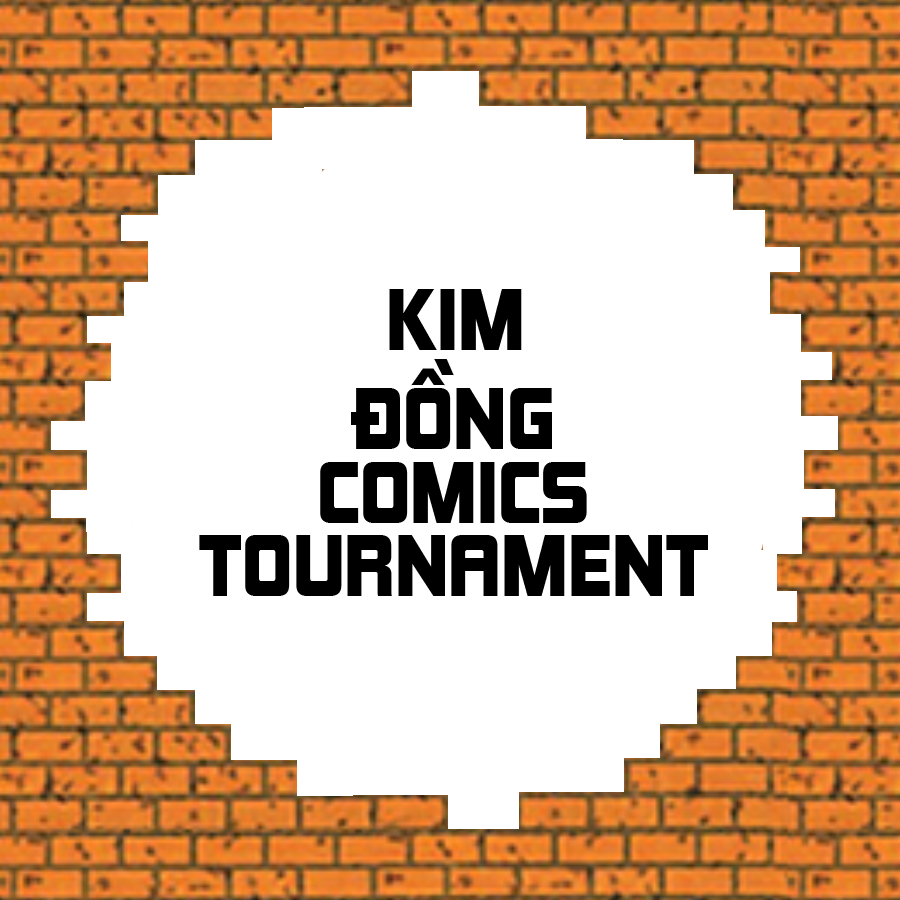
<style>
.page{position:relative;width:900px;height:900px;background:#ffffff}
.page>*{position:absolute;margin:0}
.t1{font:80px "SVN-Kimberley";color:#000000}
</style>
<div class="page">
<p class="t1" style="left:389px;top:289px;width:133px;height:61px">KIM</p>
<p class="t1" style="left:351px;top:359px;width:201px;height:90px">ĐỒNG</p>
<p class="t1" style="left:320px;top:462px;width:267px;height:61px">COMICS</p>
<p class="t1" style="left:199px;top:535px;width:509px;height:61px">TOURNAMENT</p>
</div>
